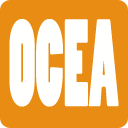
<style>
.page{position:relative;width:128px;height:128px;background:#e88c14}
.page>*{position:absolute;margin:0}
.t1{font:115.8px "PoplarStd";color:#fffffe;scale:0.52 1}
</style>
<div class="page">
<p class="t1" style="left:9px;top:19px;width:110px;height:88px">OCEA</p>
</div>
